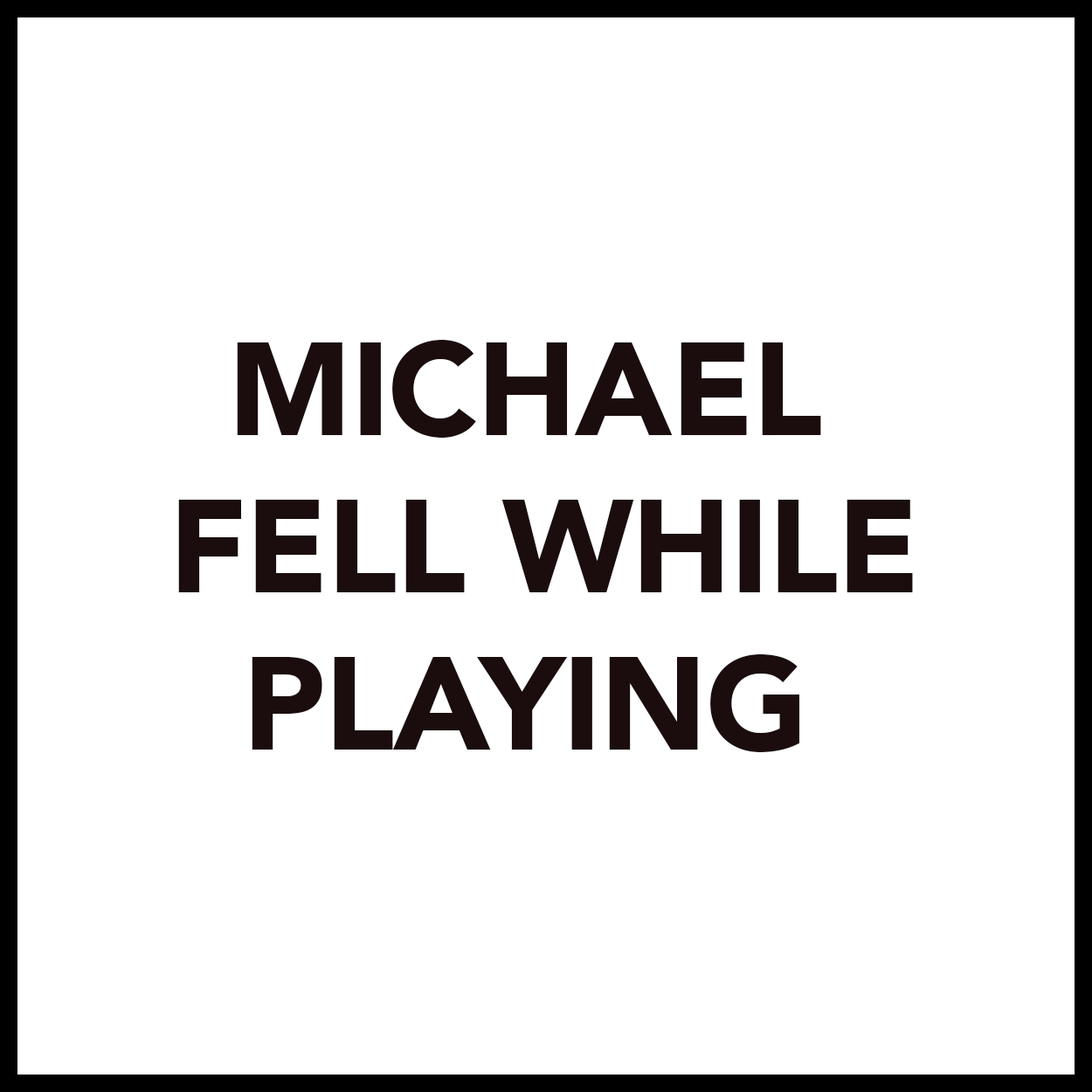
<style>
.page{position:relative;width:1092px;height:1092px;background:#ffffff}
.page>*{position:absolute;margin:0}
.t1{font:131px "Avenir-Black";letter-spacing:-0.01em;color:#1b0d0d}
</style>
<div class="page">
<p class="t1" style="left:178px;top:340px;width:735px;height:412px;text-align:center">MICHAEL<br> FELL WHILE<br>PLAYING</p>
</div>
